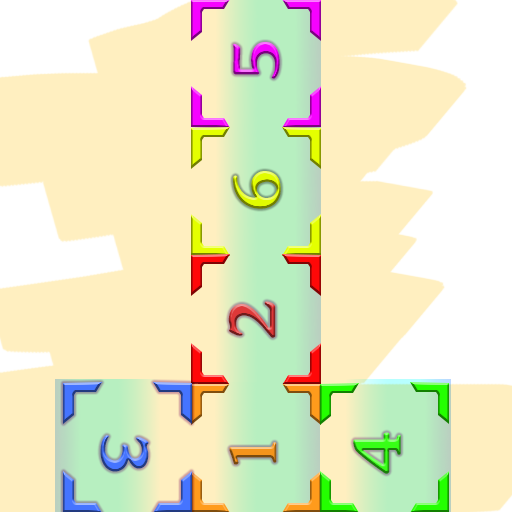
<style>
.page{position:relative;width:512px;height:512px;background:#ffefc0}
.page>*{position:absolute;margin:0}
.t1{font:72px "ARJULIAN"}
</style>
<div class="page">
<p class="t1" style="left:233px;top:42px;width:47px;height:37px;rotate:-90deg">5</p>
<p class="t1" style="left:233px;top:171px;width:48px;height:38px;rotate:-90deg">6</p>
<p class="t1" style="left:228px;top:301px;width:48px;height:37px;rotate:-90deg">2</p>
<p class="t1" style="left:100px;top:435px;width:49px;height:37px;rotate:90deg">3</p>
<p class="t1" style="left:353px;top:432px;width:48px;height:42px;rotate:-90deg">4</p>
<p class="t1" style="left:229px;top:442px;width:48px;height:23px;rotate:-90deg">1</p>
</div>
